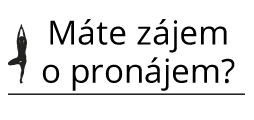
<style>
.page{position:relative;width:254px;height:120px;background:#ffffff}
.page>*{position:absolute;margin:0}
.t1{font:33.3px "OpenSans";color:#000000}
</style>
<div class="page">
<p class="t1" style="left:50px;top:19px;width:177px;height:34px">Máte zájem</p>
<p class="t1" style="left:42px;top:57px;width:193px;height:34px">o pronájem?</p>
</div>
